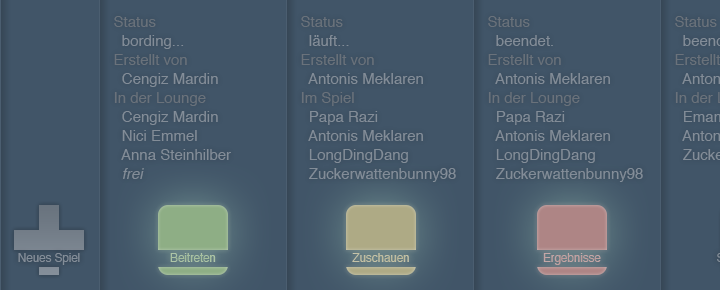
<style>
.page{position:relative;width:720px;height:290px;background:#415568}
.page>*{position:absolute;margin:0}
.t1{font:15px/19px "Helvetica";color:#838d98}
.t2{font:15px/26px "Helvetica";color:#6a727b}
.t3{font:15px/19px "Helvetica";color:#6a727b}
.t4{font:15px/19px "Helvetica-Oblique";color:#838d98}
.t5{font:12px "Helvetica";letter-spacing:-0.015em;color:#838d98}
.t6{font:12px "Helvetica";letter-spacing:-0.015em;color:#a9c1a2}
.t7{font:12px "Helvetica";letter-spacing:-0.015em;color:#c2bfa3}
.t8{font:12px "Helvetica";letter-spacing:-0.015em;color:#c2a3a3}
</style>
<div class="page">
<p class="t1" style="left:114px;top:16px;width:117px;height:163px"><span class="t2">S</span><span class="t3">tatus<br></span>  bording...<br><span class="t3">Erstellt von <br></span>  Cengiz Mardin<br><span class="t3">In der Lounge<br></span>  Cengiz Mardin<br>  Nici Emmel<br>  Anna Steinhilber<br>  <span class="t4">frei</span></p>
<p class="t1" style="left:301px;top:16px;width:155px;height:166px"><span class="t2">S</span><span class="t3">tatus<br></span>  läuft...<br><span class="t3">Erstellt von <br></span>  Antonis Meklaren<br><span class="t3">Im Spiel<br></span>  Papa Razi<br>  Antonis Meklaren<br>  LongDingDang<br>  Zuckerwattenbunny98</p>
<p class="t1" style="left:488px;top:16px;width:155px;height:166px"><span class="t2">S</span><span class="t3">tatus<br></span>  beendet.<br><span class="t3">Erstellt von <br></span>  Antonis Meklaren<br><span class="t3">In der Lounge<br></span>  Papa Razi<br>  Antonis Meklaren<br>  LongDingDang<br>  Zuckerwattenbunny98</p>
<p class="t5" style="left:18px;top:253px;width:62px;height:12px">Neues Spiel</p>
<p class="t6" style="left:170px;top:253px;width:46px;height:9px">Beitreten</p>
<p class="t7" style="left:352px;top:253px;width:57px;height:9px">Zuschauen</p>
<p class="t8" style="left:543px;top:253px;width:58px;height:12px">Ergebnisse</p>
</div>
